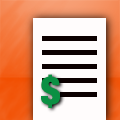
<style>
.page{position:relative;width:120px;height:120px;background:#fffcfc}
.page>*{position:absolute;margin:0}
.t1{font:38.3px "HelveticaNeue-CondensedBlack";color:#0a9043;text-transform:uppercase}
</style>
<div class="page">
<p class="t1" style="left:41px;top:74px;width:19px;height:34px">$</p>
</div>
